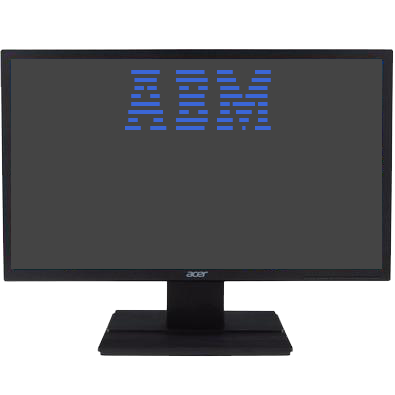
<style>
.page{position:relative;width:395px;height:395px;background:#444444}
.page>*{position:absolute;margin:0}
.t1{font:64px "IBM-Logo";color:#3b66d6;scale:0.79 1}
</style>
<div class="page">
<p class="t1" style="left:125px;top:70px;width:146px;height:60px">ABM</p>
</div>
